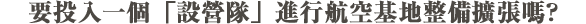
<style>
.page{position:relative;width:586px;height:24px;background:#ffffff}
.page>*{position:absolute;margin:0}
.t1{font:24px "RyuminPr6N-ExBold";color:#4c4843;font-weight:bold}
</style>
<div class="page">
<p class="t1" style="left:29px;top:0px;width:529px;height:24px">要投入一個「設營隊」進行航空基地整備擴張嗎?</p>
</div>
